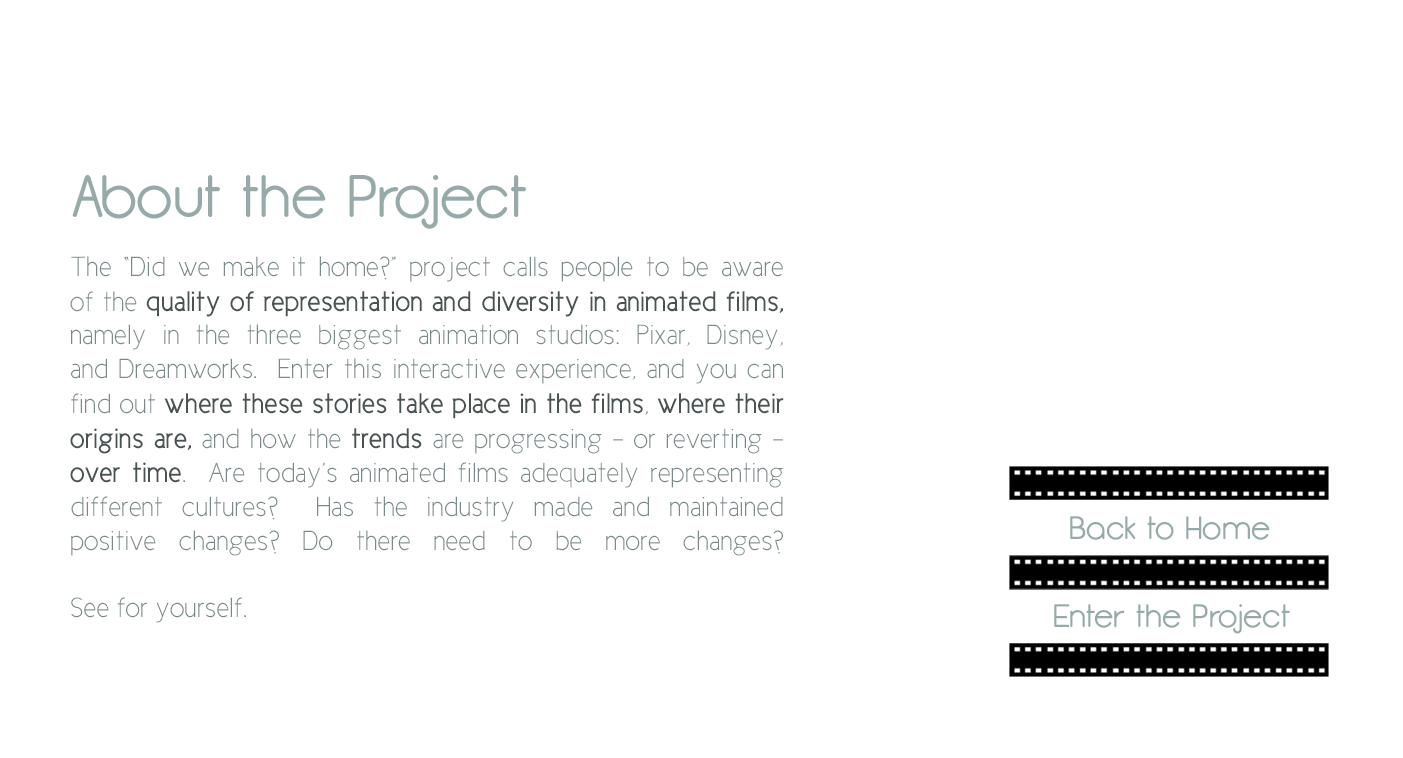
<style>
.page{position:relative;width:1403px;height:758px;background:#ffffff}
.page>*{position:absolute;margin:0}
.t1{font:60px "Opificio-Rounded";color:#97aaaa}
.t2{font:28px "CicleFina";color:#7a8a8a}
.t3{font:29px "CicleGordita";color:#495353}
.t4{font:29px "CicleFina";color:#7a8a8a}
.t5{font:32.5px "Opificio-Rounded";color:#97aaaa}
</style>
<div class="page">
<p class="t1" style="left:72px;top:175px;width:454px;height:54px">About the Project</p>
<p class="t2" style="left:70px;top:256px;width:714px;height:367px;text-align:justify">The “Did we make it home?” project calls people to be aware<br>of the <span class="t3">quality of representation and diversity in animated films,<br></span>namely in the three biggest animation studios: Pixar, Disney, <br>and Dreamworks.  Enter this interactive experience, and you can<br>find out <span class="t3">where these stories take place in the films</span><span class="t4">, </span><span class="t3">where their <br>origins are,</span> and how the <span class="t3">trends </span>are progressing - or reverting - <br><span class="t3">over time</span>.  Are today’s animated films adequately representing<br>different cultures?  Has the industry made and maintained <br>positive changes? Do there need to be more changes?<br><br>See for yourself.</p>
<p class="t5" style="left:1070px;top:516px;width:200px;height:24px">Back to Home</p>
<p class="t5" style="left:1054px;top:604px;width:236px;height:30px">Enter the Project</p>
</div>
